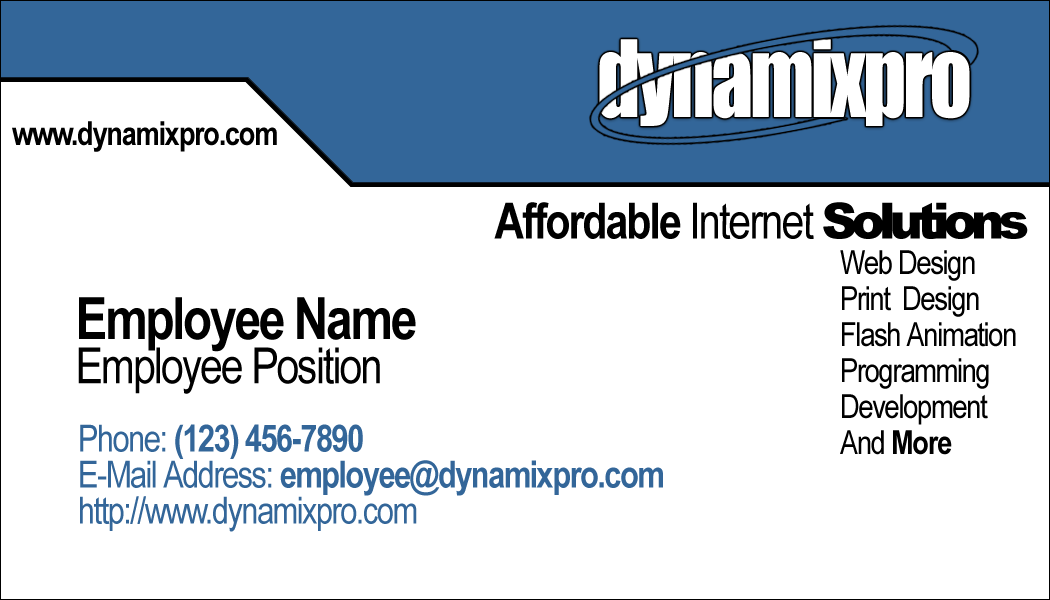
<style>
.page{position:relative;width:1050px;height:600px;background:#ffffff}
.page>*{position:absolute;margin:0}
.t1{font:98.5px "Impact";letter-spacing:-0.04em;color:#ffffff;scale:0.85 1}
.t2{font:33.3px "ArialNarrow-Bold";letter-spacing:-0.04em;color:#000000}
.t3{font:50px "ArialNarrow-Bold";letter-spacing:-0.04em;color:#000000}
.t4{font:50px "ArialNarrow";letter-spacing:-0.04em;color:#000000}
.t5{font:50px "Arial-Black";letter-spacing:-0.12em;color:#000000}
.t6{font:33.3px/36px "ArialNarrow";letter-spacing:-0.04em;color:#000000}
.t7{font:33.3px/44.4px "ArialNarrow";letter-spacing:-0.04em;color:#000000}
.t8{font:33.3px/36px "ArialNarrow-Bold";letter-spacing:-0.04em;color:#000000}
.t9{font:50px/44.4px "ArialNarrow";letter-spacing:-0.04em;color:#000000}
.t10{font:58.3px/44.4px "ArialNarrow-Bold";letter-spacing:-0.04em;color:#000000}
.t11{font:37.5px/36px "ArialNarrow";letter-spacing:-0.04em;color:#336699}
.t12{font:37.5px/36px "ArialNarrow-Bold";letter-spacing:-0.04em;color:#336699}
</style>
<div class="page">
<p class="t1" style="left:599px;top:39px;width:371px;height:87px">dynamixpro</p>
<p class="t2" style="left:12px;top:121px;width:265px;height:31px">www.dynamixpro.com</p>
<p class="t3" style="left:494px;top:202px;width:534px;height:37px">Affordable <span class="t4">Internet </span><span class="t5">Solutions</span></p>
<p class="t6" style="left:840px;top:250px;width:176px;height:205px"><span class="t7">Web Design<br></span>Print  Design<br>Flash Animation<br>Programming<br>Development<br>And <span class="t8">More</span></p>
<p class="t9" style="left:78px;top:297px;width:338px;height:97px"><span class="t10">Employee Name<br></span>Employee Position</p>
<p class="t11" style="left:80px;top:424px;width:583px;height:108px">Phone: <span class="t12">(123) 456-7890<br></span>E-Mail Address: <span class="t12">employee@dynamixpro.com<br></span>http://www.dynamixpro.com</p>
</div>
